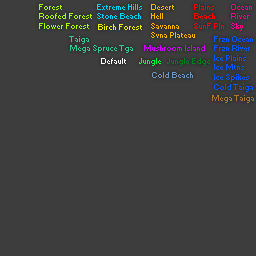
<style>
.page{position:relative;width:256px;height:256px;background:#3d3d3d}
.page>*{position:absolute;margin:0}
.t1{font:8px "Small Fonts";color:#a8ff00}
.t2{font:8px "Small Fonts";color:#00d8ff}
.t3{font:8px "Small Fonts";color:#ffba00}
.t4{font:8px "Small Fonts";color:#ff0000}
.t5{font:8px "Small Fonts";color:#ff0093}
.t6{font:8px "Small Fonts";color:#f3f600}
.t7{font:8px "Small Fonts";color:#31cb96}
.t8{font:8px "Small Fonts";color:#005aff}
.t9{font:8px "Small Fonts";color:#d200ff}
.t10{font:8px "Small Fonts";color:#ffffff}
.t11{font:8px "Small Fonts";color:#00ff3c}
.t12{font:8px "Small Fonts";color:#007e1e}
.t13{font:8px "Small Fonts";color:#7098c5}
.t14{font:8px "Small Fonts";color:#ac7a33}
</style>
<div class="page">
<p class="t1" style="left:39px;top:4px;width:53px;height:25px">Forest<br>Roofed Forest<br>Flower Forest</p>
<p class="t2" style="left:97px;top:4px;width:45px;height:15px">Extreme Hills<br>Stone Beach</p>
<p class="t3" style="left:151px;top:4px;width:44px;height:34px">Desert<br>Hell<br>Savanna<br>Svna Plateau</p>
<p class="t4" style="left:194px;top:4px;width:30px;height:25px">Plains<br>Beach<br>SunF Pln</p>
<p class="t5" style="left:231px;top:4px;width:21px;height:27px">Ocean<br>River<br>Sky</p>
<p class="t6" style="left:98px;top:24px;width:44px;height:6px">Birch Forest</p>
<p class="t7" style="left:69px;top:36px;width:64px;height:17px">Taiga<br>Mega Spruce Tga</p>
<p class="t8" style="left:214px;top:36px;width:39px;height:56px">Frzn Ocean<br>Frzn River<br>Ice Plains<br>Ice Mtns<br>Ice Spikes<br>Cold Taiga<br>141 Ice Mountains Spikes 225,0?</p>
<p class="t9" style="left:144px;top:45px;width:61px;height:6px">Mushroom Island</p>
<p class="t10" style="left:101px;top:58px;width:25px;height:6px">Default</p>
<p class="t11" style="left:139px;top:58px;width:22px;height:8px">Jungle</p>
<p class="t12" style="left:167px;top:58px;width:43px;height:8px">Jungle Edge</p>
<p class="t13" style="left:152px;top:72px;width:41px;height:6px">Cold Beach</p>
<p class="t14" style="left:212px;top:95px;width:42px;height:8px">Mega Taiga</p>
</div>
